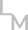
<style>
.page{position:relative;width:28px;height:30px;background:#ffffff}
.page>*{position:absolute;margin:0}
.t1{font:21.6px "Bahnschrift";color:#c0c0c0;scale:1.25 1}
</style>
<div class="page">
<p class="t1" style="left:0px;top:0px;width:13px;height:16px">L</p>
<p class="t1" style="left:11px;top:14px;width:17px;height:17px">M</p>
</div>
